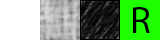
<style>
.page{position:relative;width:160px;height:40px;background:#ffffff}
.page>*{position:absolute;margin:0}
.t1{font:38px "MyriadPro-Regular";color:#000000}
</style>
<div class="page">
<p class="t1" style="left:133px;top:7px;width:17px;height:26px">R</p>
</div>
